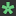
<style>
.page{position:relative;width:16px;height:16px;background:#333333}
.page>*{position:absolute;margin:0}
.t1{font:30.7px "LucidaSansUnicode";letter-spacing:0.02em;color:#6bce80;font-weight:bold}
</style>
<div class="page">
<p class="t1" style="left:1px;top:2px;width:14px;height:12px">*</p>
</div>
